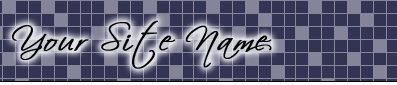
<style>
.page{position:relative;width:397px;height:85px}
.page>*{position:absolute;margin:0}
.t1{font:33px "Scriptina";letter-spacing:0.044em;color:#000000;font-weight:bold}
</style>
<div class="page">
<p class="t1" style="left:12px;top:20px;width:260px;height:49px">Your Site Name</p>
</div>
